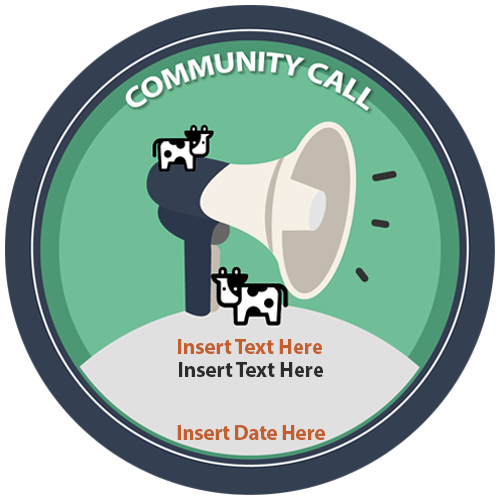
<style>
.page{position:relative;width:500px;height:500px;background:#ffffff}
.page>*{position:absolute;margin:0}
.t1{font:22.1px "MyriadPro-Bold";letter-spacing:-0.01em;color:#c35e2e}
.t2{font:22.1px "MyriadPro-Bold";letter-spacing:-0.01em;color:#2c2c2c}
.t3{font:21.7px "MyriadPro-Bold";letter-spacing:-0.01em;color:#c35e2e}
</style>
<div class="page">
<p class="t1" style="left:178px;top:339px;width:144px;height:15px">Insert Text Here</p>
<p class="t2" style="left:179px;top:362px;width:144px;height:15px">Insert Text Here</p>
<p class="t3" style="left:177px;top:425px;width:148px;height:15px">Insert Date Here</p>
</div>
